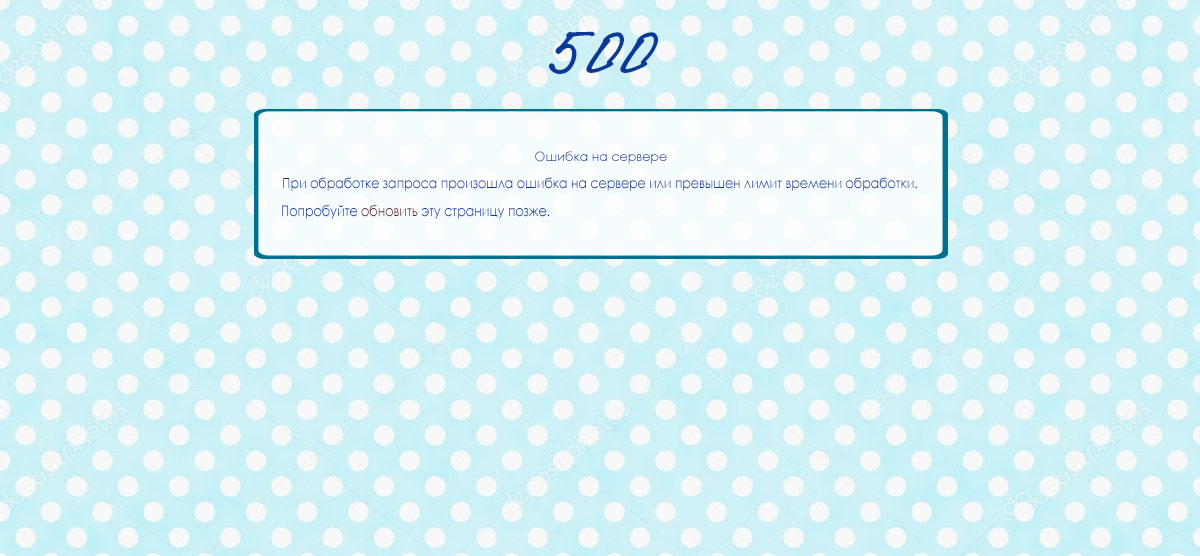
<style>
.page{position:relative;width:1200px;height:556px}
.page>*{position:absolute;margin:0}
.t1{font:84.7px "Katherine-Plus";color:#093999}
.t2{font:12.7px "CenturyGothic";color:#093999}
.t3{font:13.9px "CenturyGothic";color:#093999;scale:0.89 1}
.t4{font:14.8px "CenturyGothic";color:#093999;scale:0.85 1}
</style>
<div class="page">
<p class="t1" style="left:549px;top:31px;width:109px;height:43px">500</p>
<p class="t2" style="left:535px;top:151px;width:132px;height:13px">Ошибка на сервере</p>
<p class="t3" style="left:283px;top:177px;width:634px;height:14px">При обработке запроса произошла ошибка на сервере или превышен лимит времени обработки.</p>
<p class="t4" style="left:282px;top:205px;width:268px;height:14px">Попробуйте обновить эту страницу позже.</p>
</div>
